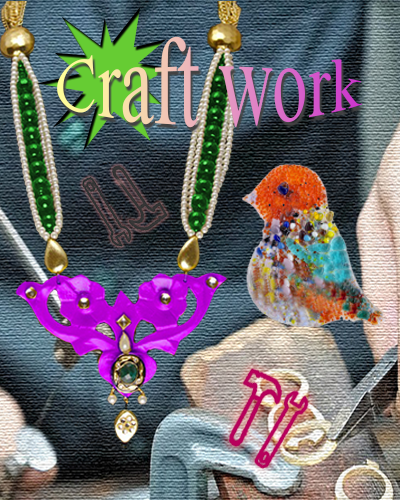
<style>
.page{position:relative;width:400px;height:500px}
.page>*{position:absolute;margin:0}
.t1{font:50px/50.7px "TimesNewRomanPSMT";scale:1.4 1}
</style>
<div class="page">
<p class="t1" style="left:57px;top:36px;width:305px;height:92px">Craft work</p>
</div>
